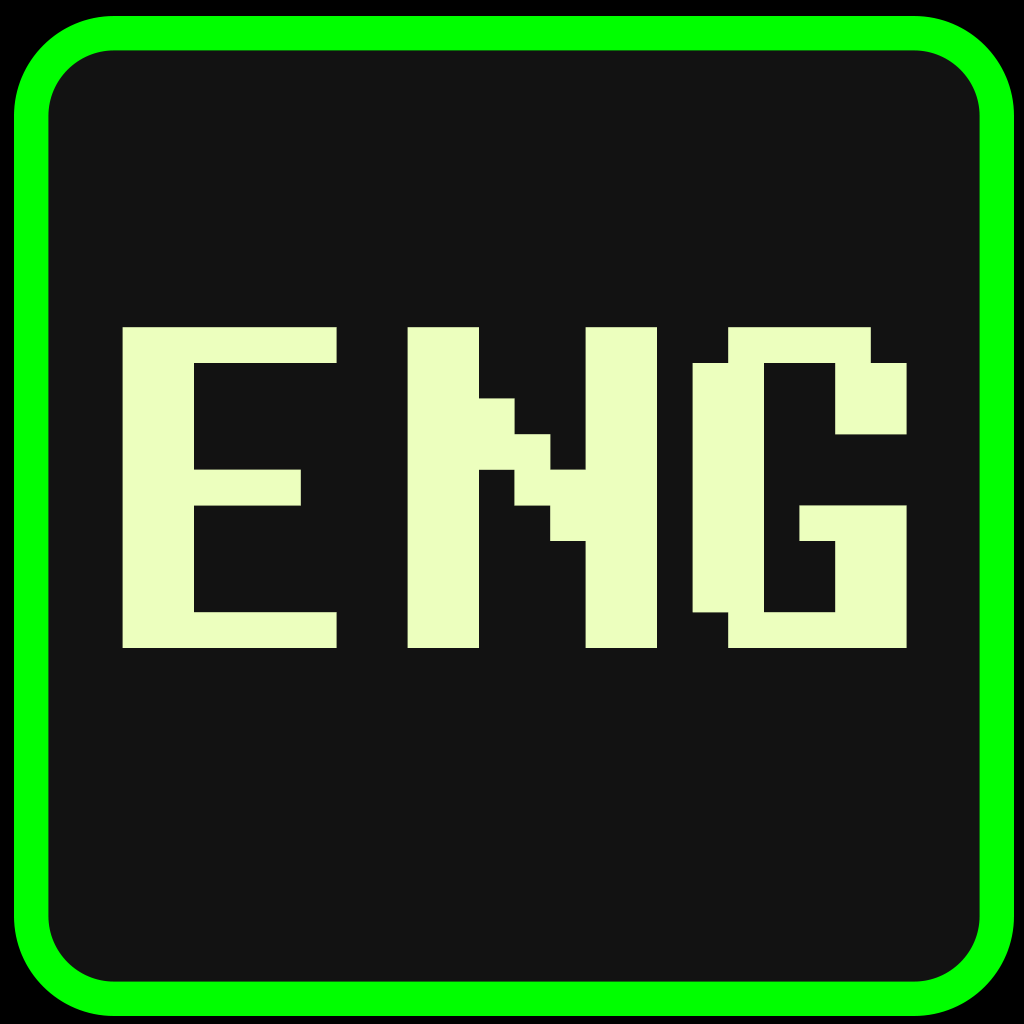
<style>
.page{position:relative;width:1024px;height:1024px;background:#121212}
.page>*{position:absolute;margin:0}
.t1{font:456px "Fixedsys";color:#ecffbe}
</style>
<div class="page">
<p class="t1" style="left:122px;top:327px;width:785px;height:321px">ENG</p>
</div>
